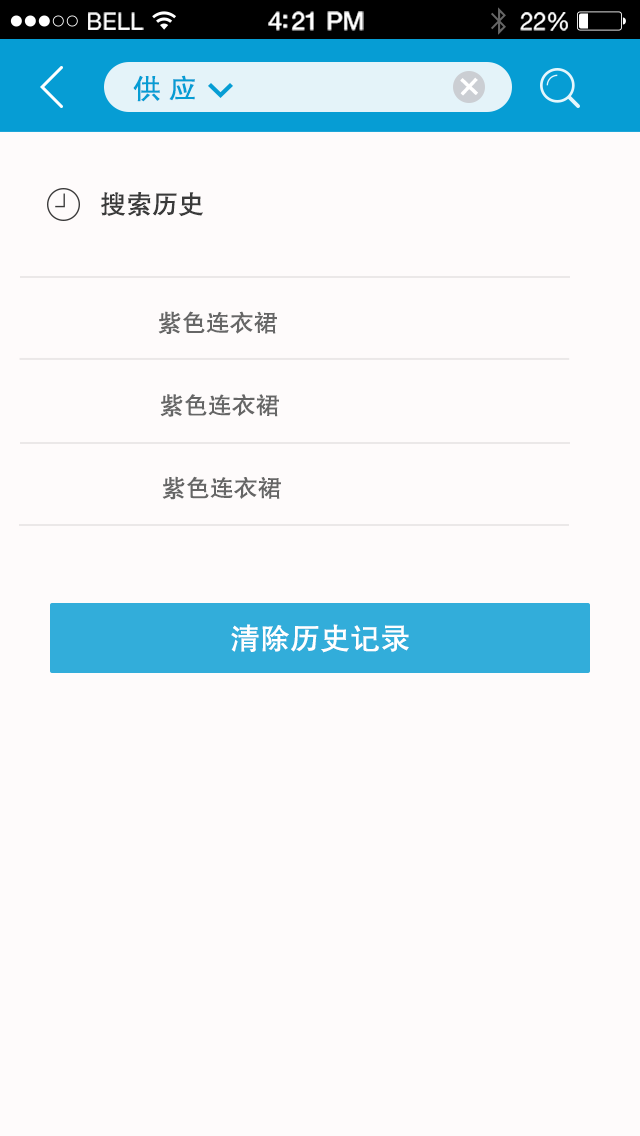
<style>
.page{position:relative;width:640px;height:1136px;background:#fefbfb}
.page>*{position:absolute;margin:0}
.t1{font:23.1px "HelveticaNeue";letter-spacing:0.02em;color:#ffffff}
.t2{font:25.1px "HelveticaNeue-Medium";letter-spacing:-0.02em;color:#ffffff}
.t3{font:24.1px "HelveticaNeue";letter-spacing:-0.02em;color:#ffffff}
.t4{font:28px "FZHTJW--GB1-0";color:#069dd4}
.t5{font:42.3px "MicrosoftYaHei";color:#ffffff}
.t6{font:26px "FZHTJW--GB1-0";color:#3a3a3a}
.t7{font:24px "FZHTJW--GB1-0";color:#666666}
.t8{font:30px "FZHTJW--GB1-0";color:#ffffff}
</style>
<div class="page">
<p class="t1" style="left:88px;top:12px;width:56px;height:18px">BELL</p>
<p class="t2" style="left:268px;top:11px;width:96px;height:20px">4:21 PM</p>
<p class="t3" style="left:520px;top:12px;width:48px;height:19px">22%</p>
<p class="t4" style="left:133px;top:75px;width:62px;height:27px">供 应</p>
<p class="t5" style="left:460px;top:77px;width:18px;height:19px;rotate:43deg">+</p>
<p class="t6" style="left:101px;top:192px;width:102px;height:25px">搜索历史</p>
<p class="t7" style="left:158px;top:311px;width:119px;height:23px">紫色连衣裙</p>
<p class="t7" style="left:160px;top:394px;width:119px;height:23px">紫色连衣裙</p>
<p class="t7" style="left:162px;top:476px;width:119px;height:24px">紫色连衣裙</p>
<p class="t8" style="left:231px;top:624px;width:178px;height:29px">清除历史记录</p>
</div>
